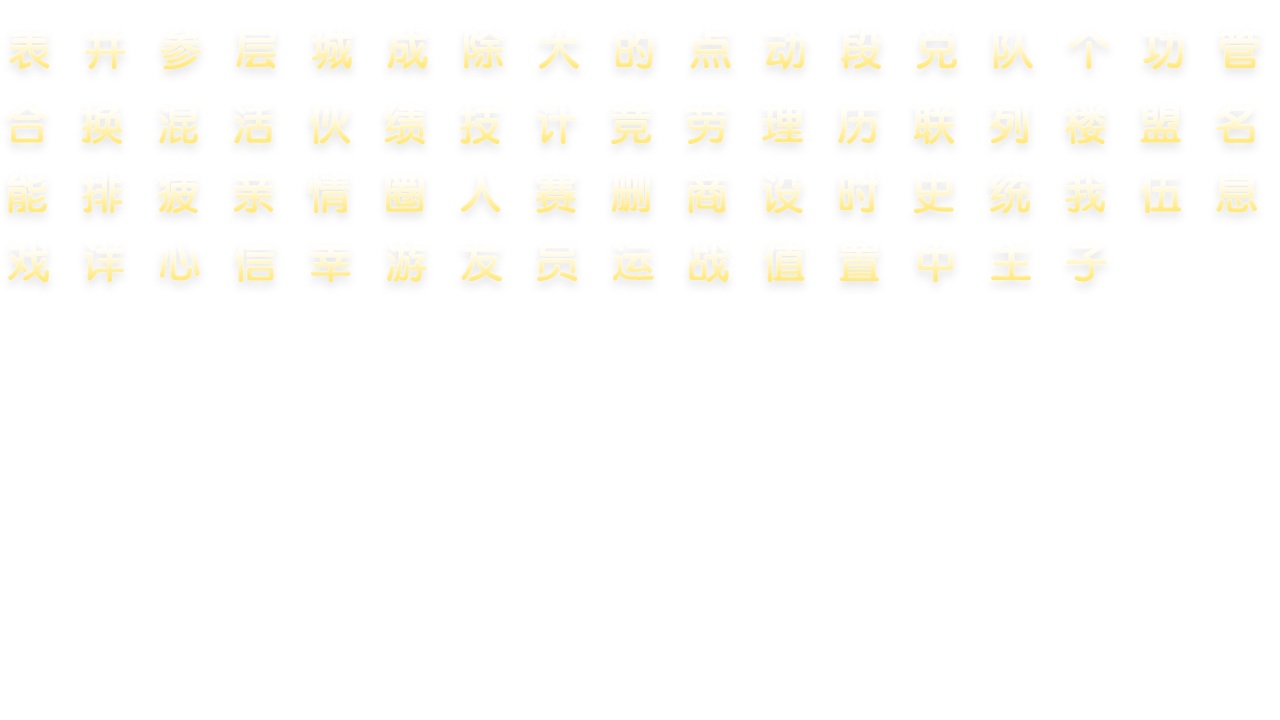
<style>
.page{position:relative;width:1280px;height:720px;background:#ffffff}
.page>*{position:absolute;margin:0}
.t1{font:42px "STYuanti-SC-Bold";letter-spacing:0.8em}
</style>
<div class="page">
<p class="t1" style="left:9px;top:28px;width:1251px;height:42px">表并参层城成除大的点动段兑队个功管</p>
<p class="t1" style="left:6px;top:103px;width:1249px;height:42px">合换混活伙绩技计竞劳理历联列楼盟名</p>
<p class="t1" style="left:7px;top:172px;width:1250px;height:42px">能排疲亲情圈人赛删商设时史统我伍息</p>
<p class="t1" style="left:8px;top:241px;width:1099px;height:42px">戏详心信幸游友员运战值置中主子</p>
</div>
